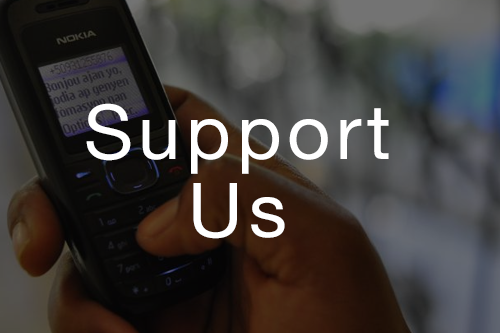
<style>
.page{position:relative;width:500px;height:333px}
.page>*{position:absolute;margin:0}
.t1{font:75.5px/262.5px "HelveticaNeue";letter-spacing:0.075em;color:#ffffff}
</style>
<div class="page">
<p class="t1" style="left:86px;top:103px;width:303px;height:136px;text-align:center">Support<br>Us</p>
</div>
